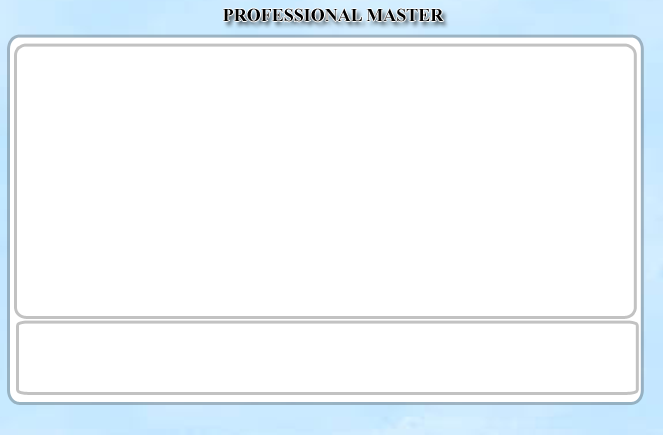
<style>
.page{position:relative;width:663px;height:435px;background:#ffffff}
.page>*{position:absolute;margin:0}
.t1{font:18px "TimesNewRomanPS-BoldMT";color:#000000}
</style>
<div class="page">
<p class="t1" style="left:223px;top:8px;width:221px;height:14px">PROFESSIONAL MASTER</p>
</div>
